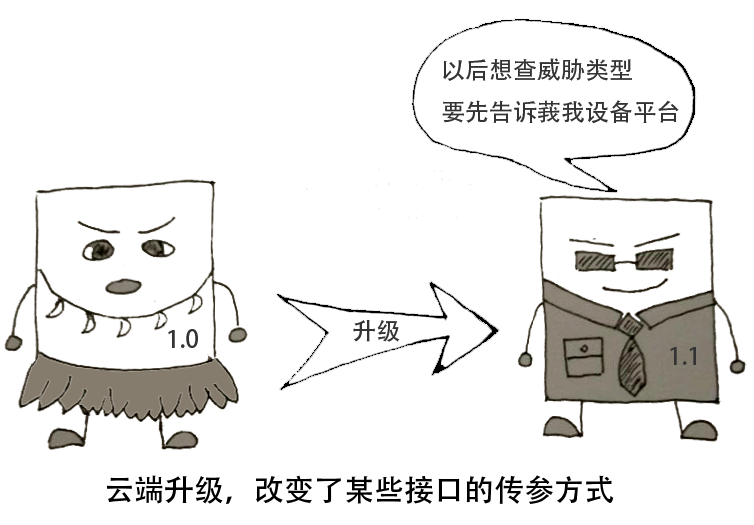
<style>
.page{position:relative;width:754px;height:525px;background:#ffffff}
.page>*{position:absolute;margin:0}
.t1{font:24px "AdobeHeitiStd-Regular";color:#333333}
.t2{font:30px "AdobeHeitiStd-Regular";color:#000000}
</style>
<div class="page">
<p class="t1" style="left:442px;top:58px;width:237px;height:66px">以后想查威胁类型<br>要先告诉莪我设备平台</p>
<p class="t1" style="left:168px;top:329px;width:30px;height:19px">1.0</p>
<p class="t1" style="left:353px;top:320px;width:47px;height:22px">升级</p>
<p class="t1" style="left:670px;top:347px;width:26px;height:18px">1.1</p>
<p class="t2" style="left:107px;top:475px;width:507px;height:29px">云端升级，改变了某些接口的传参方式</p>
</div>
